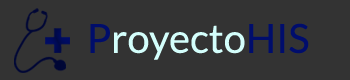
<style>
.page{position:relative;width:350px;height:80px;background:#333333}
.page>*{position:absolute;margin:0}
.t1{font:40px "Lato-Regular";color:#d4fffc}
.t2{font:40px "Lato-Regular";color:#000d6b}
.t3{font:40px "Lato-Regular";color:#000d6c}
</style>
<div class="page">
<p class="t1" style="left:90px;top:23px;width:219px;height:37px"><span class="t2">P</span>royecto<span class="t3">HIS</span></p>
</div>
